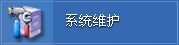
<style>
.page{position:relative;width:179px;height:45px;background:#3569b2}
.page>*{position:absolute;margin:0}
.t1{font:14px "SimSun";color:#ffffff}
</style>
<div class="page">
<p class="t1" style="left:66px;top:14px;width:53px;height:13px">系统维护</p>
</div>
